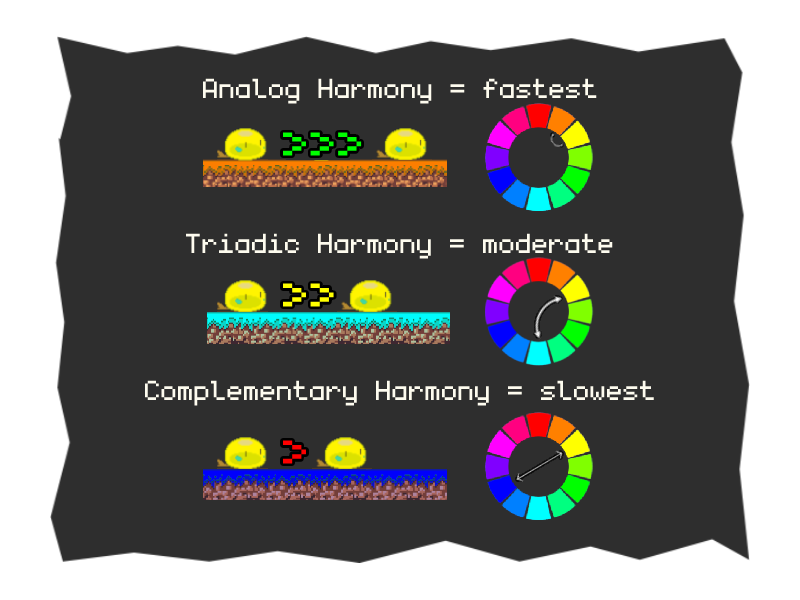
<style>
.page{position:relative;width:800px;height:600px;background:#2e2e2e}
.page>*{position:absolute;margin:0}
.t1{font:44px "monogram";color:#fefcef}
</style>
<div class="page">
<p class="t1" style="left:203px;top:78px;width:394px;height:26px">Analog Harmony = fastest</p>
<p class="t1" style="left:186px;top:233px;width:427px;height:26px">Triadic Harmony = moderate</p>
<p class="t1" style="left:145px;top:380px;width:509px;height:26px">Complementary Harmony = slowest</p>
</div>
